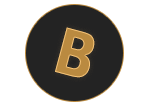
<style>
.page{position:relative;width:150px;height:106px;background:#ffffff}
.page>*{position:absolute;margin:0}
.t1{font:68.4px "FranklinGothic-DemiCond";letter-spacing:0.02em;color:#a27a3c}
</style>
<div class="page">
<p class="t1" style="left:55px;top:27px;width:40px;height:51px;rotate:15deg">B</p>
</div>
